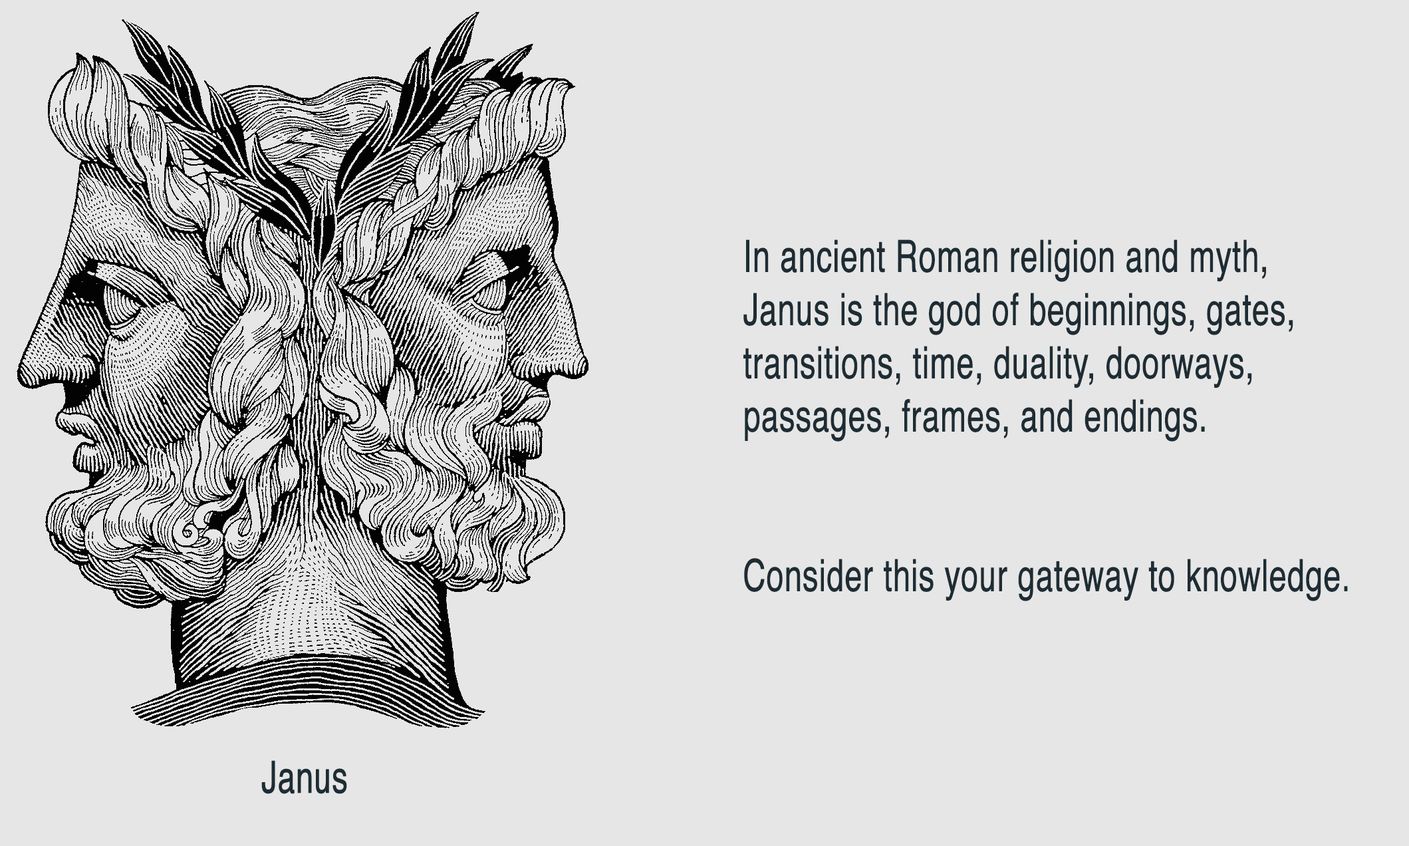
<style>
.page{position:relative;width:1409px;height:846px;background:#e6e6e6}
.page>*{position:absolute;margin:0}
.t1{font:44.3px "Helvetica";color:#1e2c34;font-weight:bold;scale:0.7 1}
</style>
<div class="page">
<p class="t1" style="left:744px;top:239px;width:604px;height:362px">In ancient Roman religion and myth, <br>Janus is the god of beginnings, gates, <br>transitions, time, duality, doorways, <br>passages, frames, and endings.<br><br><br>Consider this your gateway to knowledge.</p>
</div>
